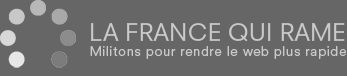
<style>
.page{position:relative;width:347px;height:76px;background:#666666}
.page>*{position:absolute;margin:0}
.t1{font:13px "NeuzeitSLTStd-Book";letter-spacing:0.05em;color:#cacaca}
.t2{font:23.5px "NeuzeitSLTStd-Book";letter-spacing:0.01em;color:#cacaca}
</style>
<div class="page">
<p class="t1" style="left:90px;top:23px;width:256px;height:36px"><span class="t2">LA FRANCE QUI RAME<br></span>Militons pour rendre le web plus rapide</p>
</div>
